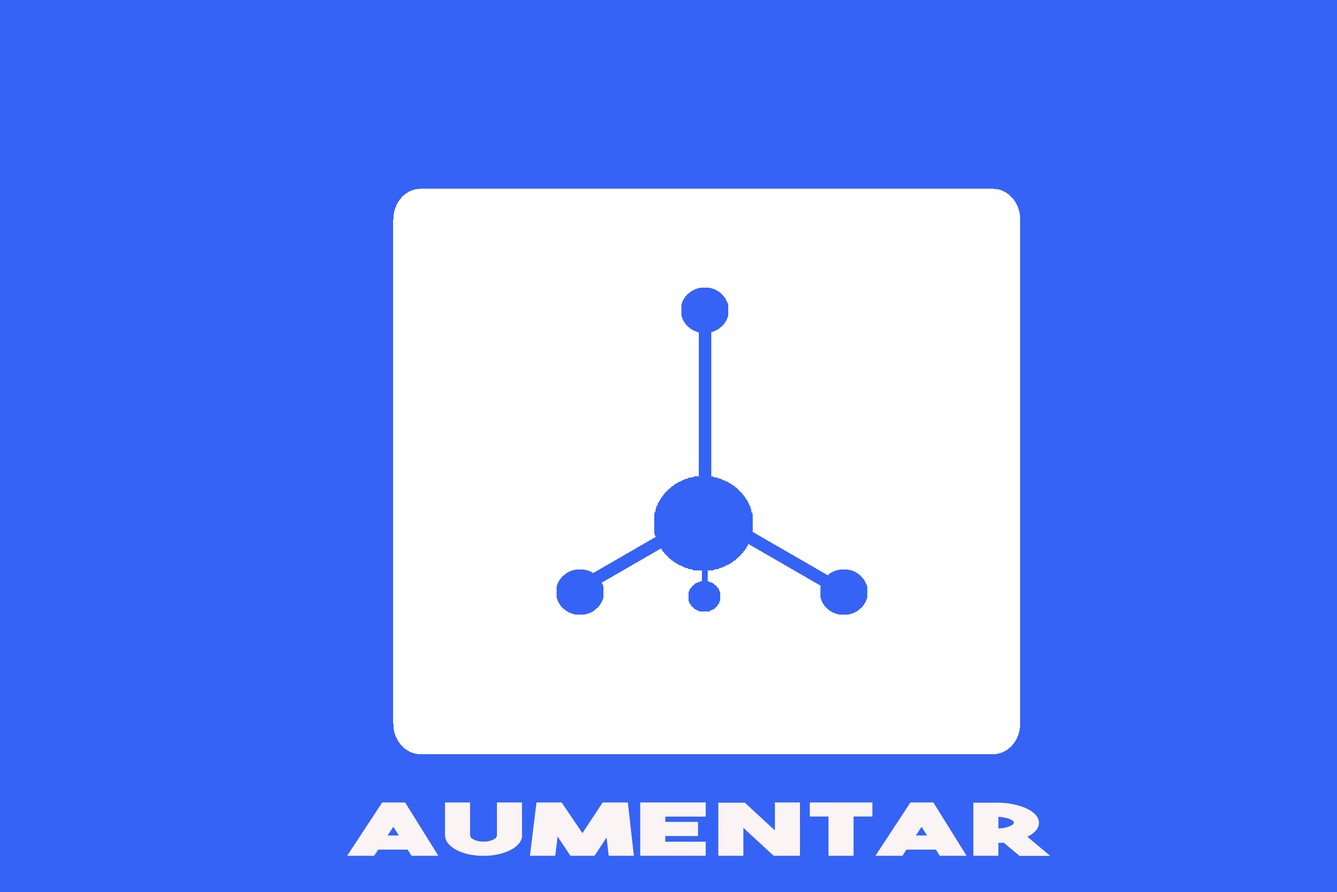
<style>
.page{position:relative;width:1337px;height:892px;background:#3563f5}
.page>*{position:absolute;margin:0}
.t1{font:69.1px "TheBoldFont";color:#fbf4f4;font-weight:bold;scale:1.94 1}
</style>
<div class="page">
<p class="t1" style="left:347px;top:802px;width:703px;height:53px">AUMENTAR</p>
</div>
